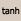
<style>
.page{position:relative;width:21px;height:21px;background:#d9cdc1}
.page>*{position:absolute;margin:0}
.t1{font:9px "Tahoma";color:#000000}
</style>
<div class="page">
<p class="t1" style="left:2px;top:7px;width:18px;height:8px">tanh</p>
</div>
